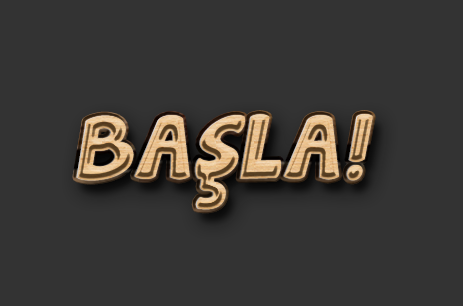
<style>
.page{position:relative;width:463px;height:306px;background:#333333}
.page>*{position:absolute;margin:0}
.t1{font:80px "JandaManateeSolid";letter-spacing:0.025em;font-style:italic}
</style>
<div class="page">
<p class="t1" style="left:76px;top:114px;width:296px;height:96px">BAŞLA!</p>
<p class="t1" style="left:77px;top:114px;width:296px;height:96px">BAŞLA!</p>
</div>
